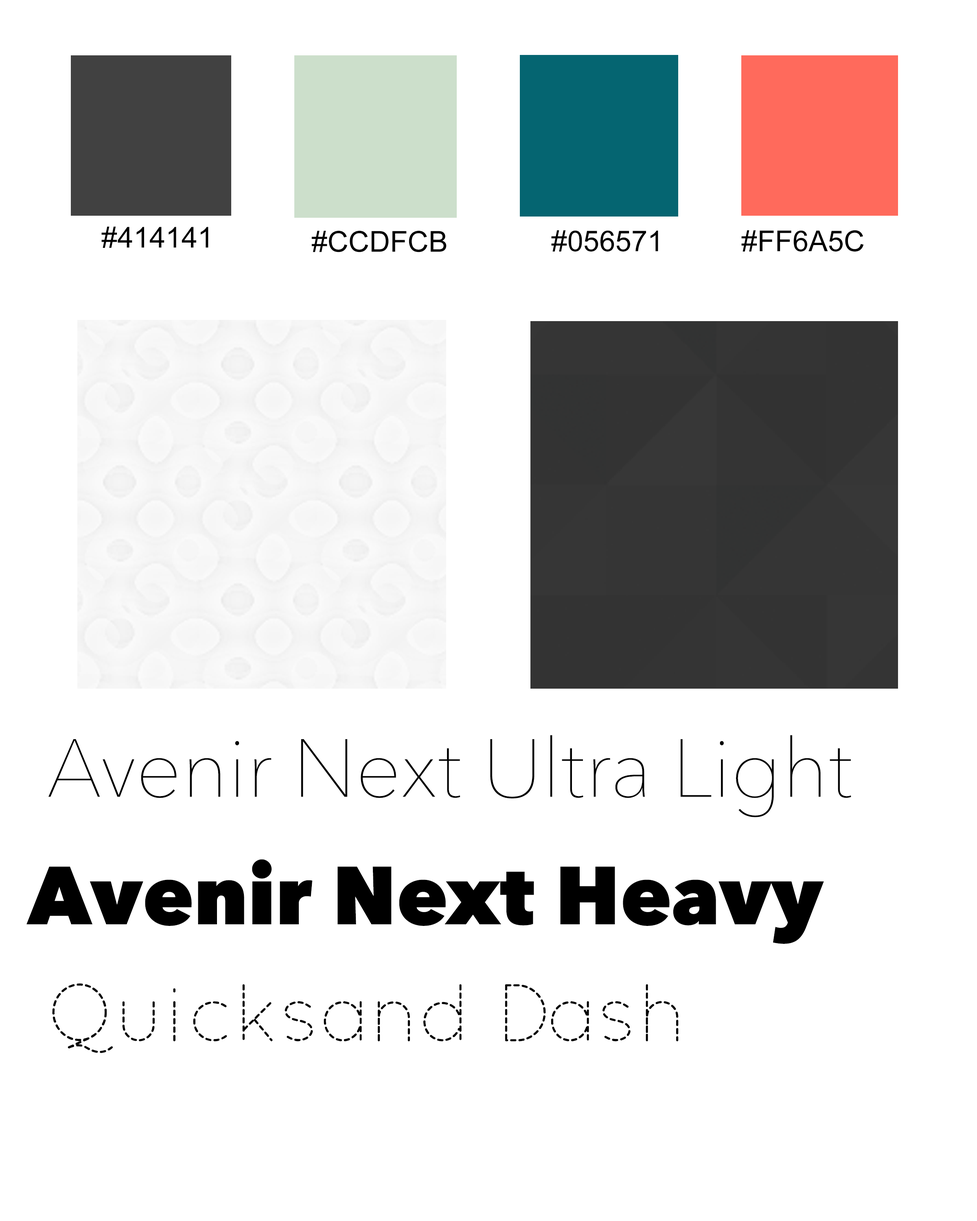
<style>
.page{position:relative;width:977px;height:1221px;background:#ffffff}
.page>*{position:absolute;margin:0}
.t1{font:28.8px "ArialMT";color:#000000}
.t2{font:81.4px "AvenirNext-UltraLight";color:#000000}
.t3{font:81.4px "AvenirNext-Heavy";color:#000000}
.t4{font:81.4px "QuicksandDash-Regular";color:#000000}
</style>
<div class="page">
<p class="t1" style="left:101px;top:226px;width:107px;height:22px">#414141</p>
<p class="t1" style="left:311px;top:231px;width:135px;height:21px">#CCDFCB</p>
<p class="t1" style="left:551px;top:230px;width:107px;height:22px">#056571</p>
<p class="t1" style="left:741px;top:230px;width:123px;height:22px">#FF6A5C</p>
<p class="t2" style="left:48px;top:735px;width:803px;height:82px">Avenir Next Ultra Light</p>
<p class="t3" style="left:26px;top:859px;width:798px;height:85px">Avenir Next Heavy</p>
<p class="t4" style="left:52px;top:983px;width:626px;height:70px">Quicksand Dash</p>
</div>
